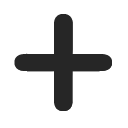
<style>
.page{position:relative;width:128px;height:128px;background:#ffffff}
.page>*{position:absolute;margin:0}
.t1{font:170.6px "CourierNewPS-BoldMT";color:#262626;scale:1.1 1}
</style>
<div class="page">
<p class="t1" style="left:14px;top:14px;width:98px;height:97px">+</p>
</div>
